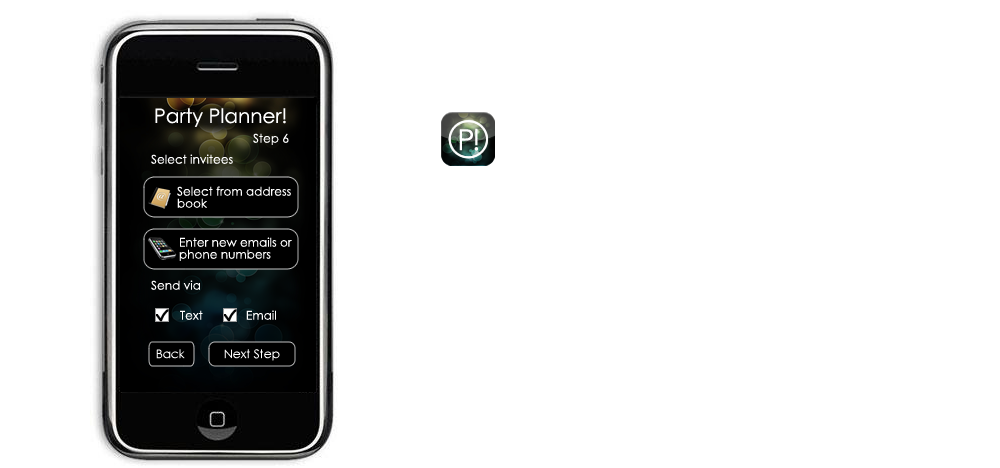
<style>
.page{position:relative;width:1000px;height:468px;background:#ffffff}
.page>*{position:absolute;margin:0}
.t1{font:20px "CenturyGothic";color:#ffffff}
.t2{font:12px "CenturyGothic";color:#ffffff}
.t3{font:29.1px "CenturyGothic";letter-spacing:-0.082em;color:#ffffff}
.t4{font:12px/12px "CenturyGothic";color:#ffffff}
</style>
<div class="page">
<p class="t1" style="left:155px;top:108px;width:131px;height:19px">Party Planner!</p>
<p class="t2" style="left:253px;top:133px;width:36px;height:12px">Step 6</p>
<p class="t3" style="left:459px;top:128px;width:20px;height:23px">P!</p>
<p class="t2" style="left:151px;top:154px;width:82px;height:10px">Select invitees</p>
<p class="t4" style="left:177px;top:186px;width:114px;height:22px">Select from address<br>book</p>
<p class="t4" style="left:179px;top:237px;width:113px;height:24px">Enter new emails or<br>phone numbers</p>
<p class="t2" style="left:151px;top:280px;width:49px;height:10px">Send via</p>
<p class="t2" style="left:180px;top:310px;width:96px;height:10px">Text             Email</p>
</div>
